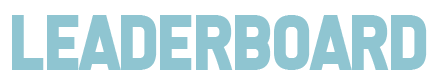
<style>
.page{position:relative;width:444px;height:83px;background:#ffffff}
.page>*{position:absolute;margin:0}
.t1{font:80px "The27Club";color:#8fc5d1}
</style>
<div class="page">
<p class="t1" style="left:12px;top:15px;width:415px;height:55px">Leaderboard</p>
</div>
